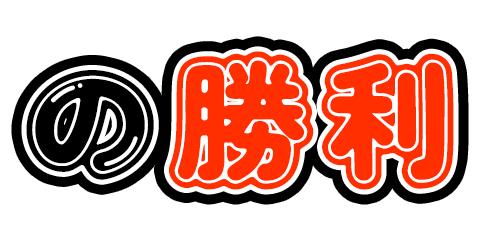
<style>
.page{position:relative;width:480px;height:240px;background:#ffffff}
.page>*{position:absolute;margin:0}
.t1{font:150px "DokiDokiFantasia";color:#ff2f00}
.t2{font:150px "DokiDokiFantasia";color:#000000}
</style>
<div class="page">
<p class="t1" style="left:26px;top:51px;width:428px;height:139px"><span class="t2">の</span>勝利</p>
</div>
